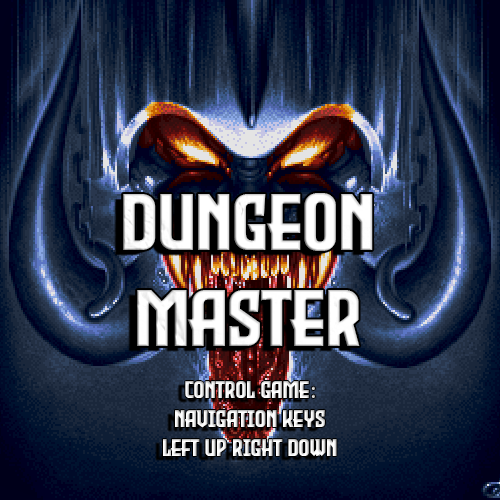
<style>
.page{position:relative;width:500px;height:500px}
.page>*{position:absolute;margin:0}
.t1{font:80px "EvilEmpire";color:#ffffff}
.t2{font:24px "EvilEmpire";color:#ffffff}
.t3{font:24px "MyriadPro-Regular";color:#ffffff}
</style>
<div class="page">
<p class="t1" style="left:123px;top:193px;width:250px;height:153px;text-align:center">dungeon<br>master</p>
<p class="t2" style="left:163px;top:381px;width:174px;height:75px;text-align:center">control game<span class="t3">: <br></span>navigation keys<br>left up right down</p>
</div>
